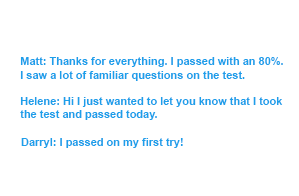
<style>
.page{position:relative;width:299px;height:196px;background:#ffffff}
.page>*{position:absolute;margin:0}
.t1{font:11px "Arial-BoldMT";color:#1c9fea}
</style>
<div class="page">
<p class="t1" style="left:20px;top:57px;width:263px;height:63px">Matt: Thanks for everything. I passed with an 80%. <br>I saw a lot of familiar questions on the test.<br><br>Helene: Hi I just wanted to let you know that I took <br>the test and passed today.</p>
<p class="t1" style="left:21px;top:138px;width:162px;height:10px">Darryl: I passed on my first try!</p>
</div>
